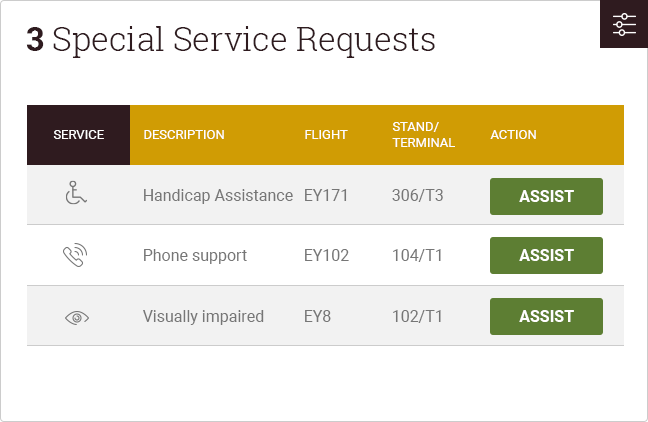
<style>
.page{position:relative;width:648px;height:422px;background:#ffffff}
.page>*{position:absolute;margin:0}
.t1{font:33px "RobotoSlab-Light";color:#2f1b1f}
.t2{font:33px "RobotoSlab-Bold";color:#2f1b1f}
.t3{font:13px "Roboto-Regular";color:#ffffff;text-transform:uppercase}
.t4{font:16px "Roboto-Regular";color:#767676}
.t5{font:16px "Roboto-Bold";color:#fffefe;text-transform:uppercase}
</style>
<div class="page">
<p class="t1" style="left:26px;top:26px;width:409px;height:32px"><span class="t2">3</span> Special Service Requests</p>
<p class="t3" style="left:392px;top:122px;width:63px;height:25px">Stand/<br>Terminal</p>
<p class="t3" style="left:53px;top:130px;width:51px;height:9px">Service</p>
<p class="t3" style="left:144px;top:130px;width:80px;height:9px">Description</p>
<p class="t3" style="left:305px;top:130px;width:43px;height:9px">Flight</p>
<p class="t3" style="left:490px;top:130px;width:46px;height:9px">Action</p>
<p class="t4" style="left:144px;top:189px;width:149px;height:15px">Handicap Assistance</p>
<p class="t4" style="left:305px;top:189px;width:42px;height:12px">EY171</p>
<p class="t4" style="left:392px;top:189px;width:51px;height:13px">306/T3</p>
<p class="t5" style="left:519px;top:190px;width:55px;height:12px">Assist</p>
<p class="t4" style="left:144px;top:249px;width:103px;height:15px">Phone support</p>
<p class="t4" style="left:305px;top:249px;width:44px;height:12px">EY102</p>
<p class="t4" style="left:393px;top:249px;width:48px;height:13px">104/T1</p>
<p class="t5" style="left:519px;top:249px;width:55px;height:12px">Assist</p>
<p class="t4" style="left:143px;top:310px;width:121px;height:15px">Visually impaired</p>
<p class="t4" style="left:305px;top:310px;width:26px;height:12px">EY8</p>
<p class="t4" style="left:393px;top:310px;width:48px;height:13px">102/T1</p>
<p class="t5" style="left:519px;top:310px;width:55px;height:12px">Assist</p>
</div>
